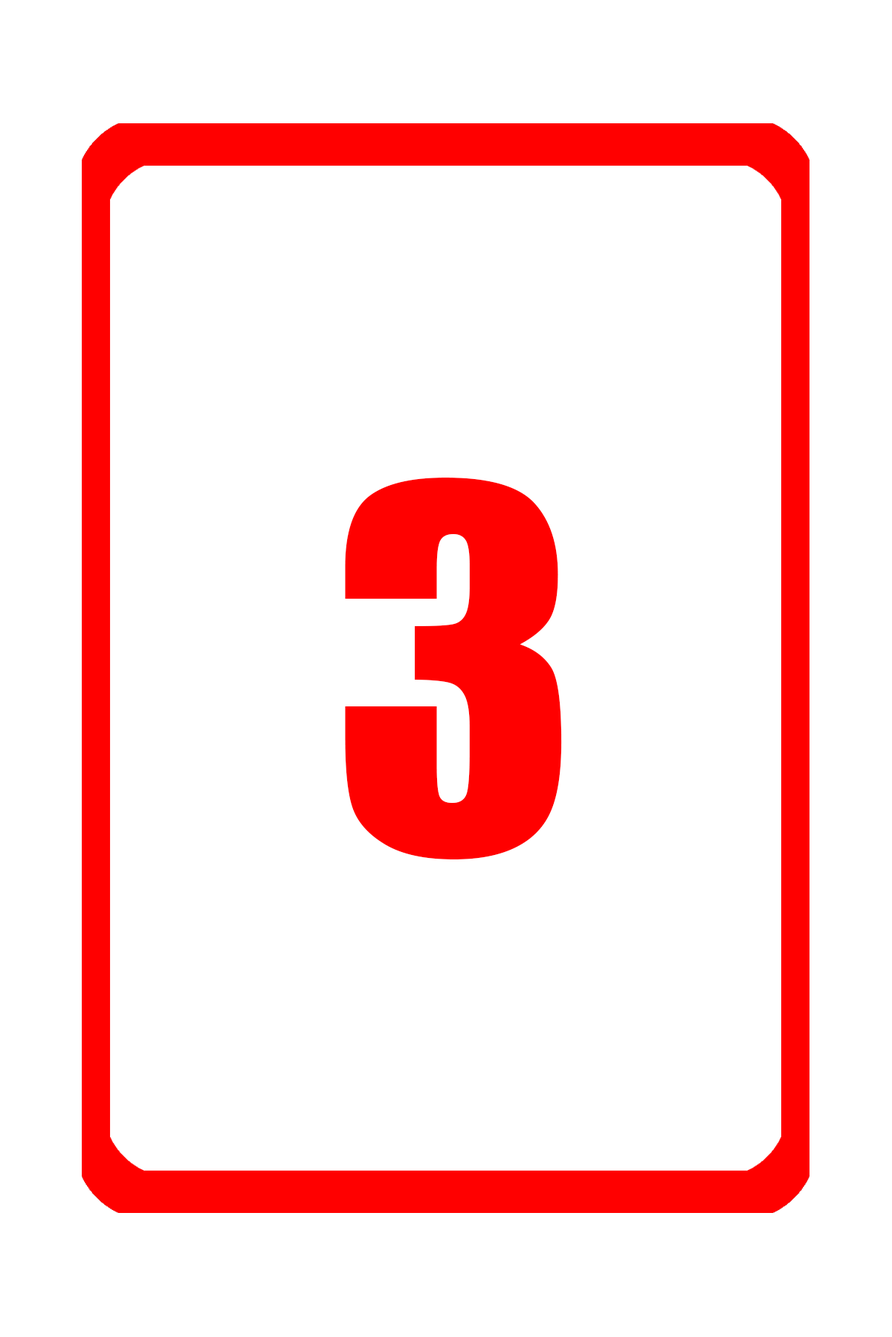
<style>
.page{position:relative;width:892px;height:1337px;background:#ffffff}
.page>*{position:absolute;margin:0}
.t1{font:464.4px "Impact";color:#ff0000}
</style>
<div class="page">
<p class="t1" style="left:345px;top:478px;width:217px;height:382px">3</p>
</div>
